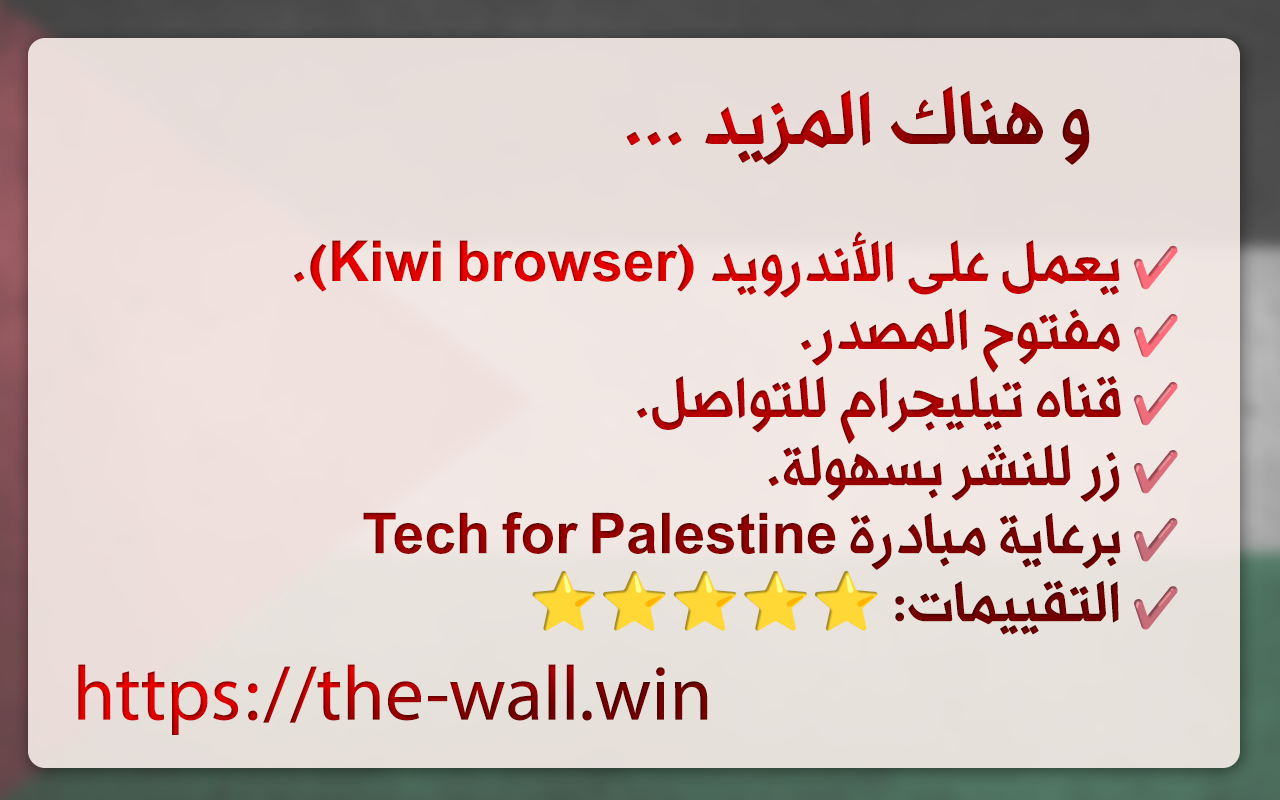
<style>
.page{position:relative;width:1280px;height:800px}
.page>*{position:absolute;margin:0}
.t1{font:75px "Watad-Regular"}
.t2{font:75px "MyriadArabic-Regular"}
.t3{font:56.7px "Watad-Regular"}
.t4{font:39.3px "NotoColorEmoji-SVG"}
.t5{font:56.7px "MyriadArabic-Regular"}
.t6{font:56.7px "NotoColorEmoji-SVG"}
.t7{font:108.3px "MyriadArabic-Regular"}
</style>
<div class="page">
<p class="t1" style="left:626px;top:86px;width:464px;height:79px">و هناك المزيد .<span class="t2">‫‫</span>.<span class="t2">‫‫</span>.<span class="t2">‫‫</span></p>
<p class="t3" style="left:294px;top:231px;width:884px;height:404px"><span class="t4">✔️ </span>يعمل على الأندرويد (Kiwi browser)<span class="t5">‫</span>.<span class="t5">‫‫<br></span><span class="t4">✔️ </span>مفتوح المصدر<span class="t5">‫</span>.<span class="t5">‫<br></span><span class="t4">✔️ </span>قناه تيليجرام للتواصل<span class="t5">‫</span>.<span class="t5">‫<br></span><span class="t4">✔️ </span>زر للنشر بسهولة<span class="t5">‫</span>.<span class="t5">‫<br></span><span class="t4">✔️ </span>برعاية مبادرة <span class="t5">‫</span>Tech for Palestine<span class="t5">‫<br></span><span class="t4">✔️ </span>التقييمات<span class="t5">‫</span>: <span class="t6">⭐⭐⭐⭐⭐</span></p>
<p class="t7" style="left:78px;top:664px;width:630px;height:71px">https://the-wall.win</p>
</div>
